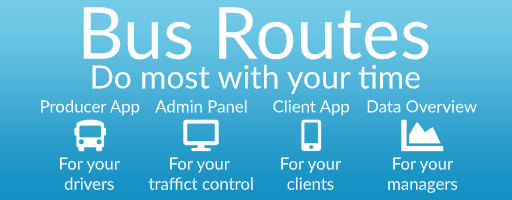
<style>
.page{position:relative;width:512px;height:200px}
.page>*{position:absolute;margin:0}
.t1{font:72px "Lato-Regular";color:#ffffff}
.t2{font:32px "Lato-Regular";color:#ffffff}
.t3{font:16.8px "Lato-Regular";color:#ffffff}
</style>
<div class="page">
<p class="t1" style="left:83px;top:7px;width:346px;height:53px">Bus Routes</p>
<p class="t2" style="left:92px;top:64px;width:328px;height:30px">Do most with your time</p>
<p class="t3" style="left:41px;top:100px;width:99px;height:16px">Producer App</p>
<p class="t3" style="left:155px;top:100px;width:92px;height:13px">Admin Panel</p>
<p class="t3" style="left:273px;top:100px;width:76px;height:16px">Client App</p>
<p class="t3" style="left:367px;top:100px;width:110px;height:13px">Data Overview</p>
<p class="t3" style="left:60px;top:157px;width:60px;height:33px;text-align:center">For your<br>drivers</p>
<p class="t3" style="left:148px;top:157px;width:105px;height:33px;text-align:center">For your <br>traffict control</p>
<p class="t3" style="left:281px;top:157px;width:60px;height:33px;text-align:center">For your<br>clients</p>
<p class="t3" style="left:388px;top:157px;width:69px;height:36px;text-align:center">For your<br>managers</p>
</div>
